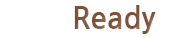
<style>
.page{position:relative;width:180px;height:38px;background:#ffffff}
.page>*{position:absolute;margin:0}
.t1{font:30px "NanumGothicBold";color:#7e5035}
</style>
<div class="page">
<p class="t1" style="left:74px;top:5px;width:82px;height:29px">Ready</p>
</div>
